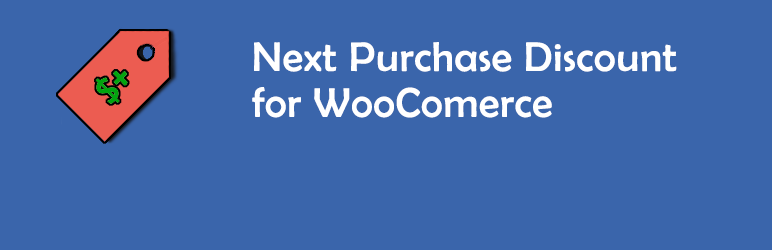
<style>
.page{position:relative;width:772px;height:250px;background:#3a65ab}
.page>*{position:absolute;margin:0}
.t1{font:41.7px/45.8px "BerlinSansFB-Reg";letter-spacing:0.02em;color:#ffffff}
</style>
<div class="page">
<p class="t1" style="left:252px;top:42px;width:425px;height:76px">Next Purchase Discount<br>for WooComerce</p>
</div>
